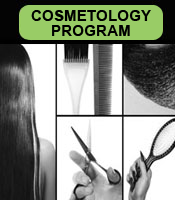
<style>
.page{position:relative;width:175px;height:200px}
.page>*{position:absolute;margin:0}
.t1{font:15.3px/15.3px "Arial-BoldMT";color:#000000;text-transform:uppercase}
</style>
<div class="page">
<p class="t1" style="left:31px;top:10px;width:120px;height:26px;text-align:center">Cosmetology<br>program</p>
</div>
